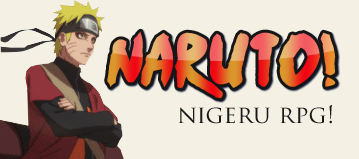
<style>
.page{position:relative;width:359px;height:159px;background:#f4f1e4}
.page>*{position:absolute;margin:0}
.t1{font:60px "Ninja-Naruto"}
.t2{font:24px "TrajanPro-Regular";color:#191919}
</style>
<div class="page">
<p class="t1" style="left:107px;top:31px;width:229px;height:68px">naruto!</p>
<p class="t2" style="left:178px;top:104px;width:154px;height:20px">nigeru rpg!</p>
</div>
